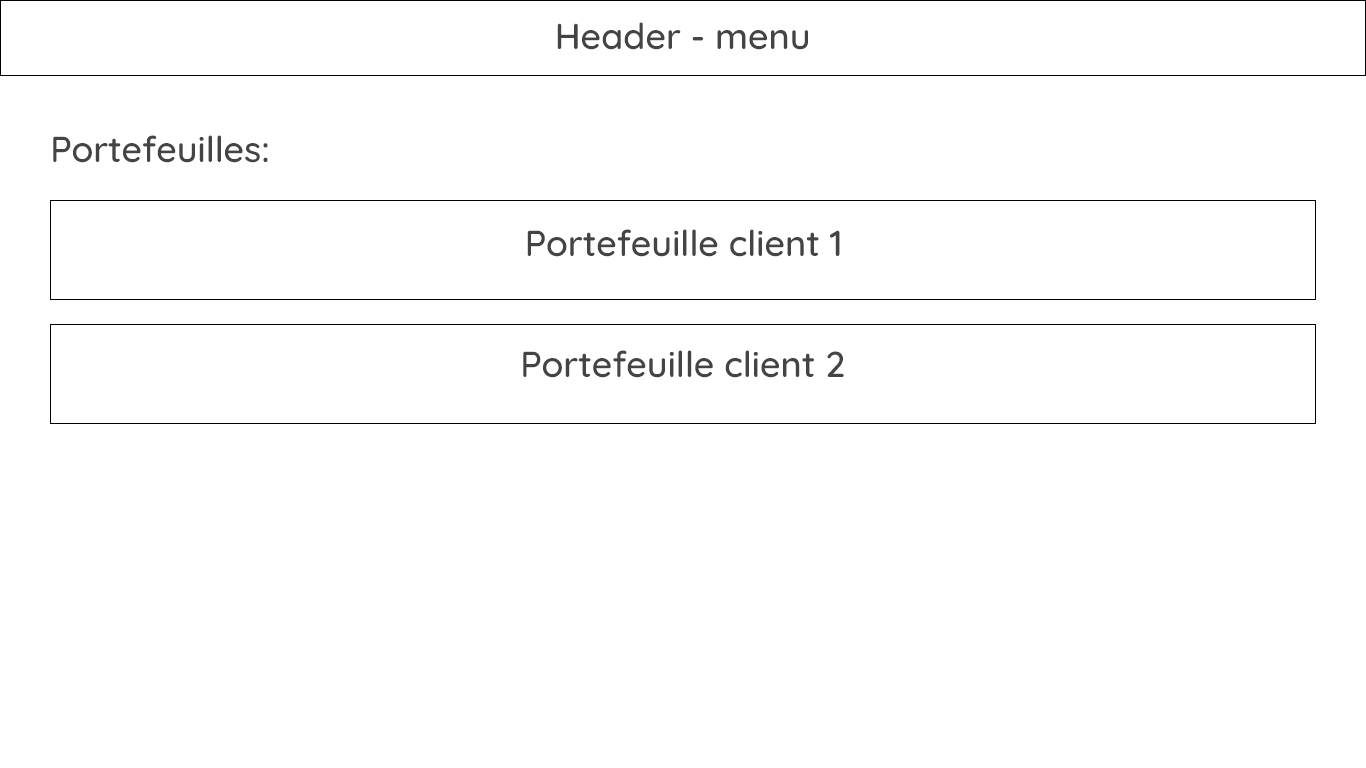
<style>
.page{position:relative;width:1366px;height:768px;background:#ffffff}
.page>*{position:absolute;margin:0}
.t1{font:36px "Quicksand-Medium";color:#444444}
</style>
<div class="page">
<p class="t1" style="left:557px;top:22px;width:251px;height:28px">Header - menu</p>
<p class="t1" style="left:53px;top:135px;width:215px;height:28px">Portefeuilles:</p>
<p class="t1" style="left:527px;top:229px;width:313px;height:28px">Portefeuille client 1</p>
<p class="t1" style="left:523px;top:350px;width:321px;height:28px">Portefeuille client 2</p>
</div>
